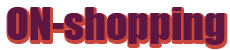
<style>
.page{position:relative;width:230px;height:50px;background:#ffffff}
.page>*{position:absolute;margin:0}
.t1{font:42px "Impact";color:#5e1742}
</style>
<div class="page">
<p class="t1" style="left:7px;top:7px;width:218px;height:38px">ON-shopping</p>
</div>
